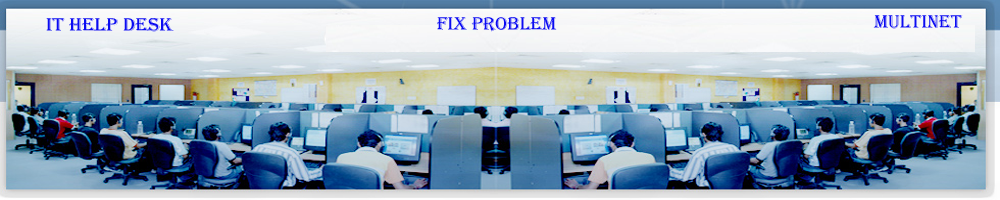
<style>
.page{position:relative;width:1000px;height:200px}
.page>*{position:absolute;margin:0}
.t1{font:19.2px "Algerian";color:#0b0bf2}
.t2{font:18.4px "Algerian";color:#0b0bf2;scale:1.06 1}
</style>
<div class="page">
<p class="t1" style="left:437px;top:17px;width:120px;height:15px">fix problem</p>
<p class="t1" style="left:873px;top:15px;width:90px;height:14px">Multinet</p>
<p class="t2" style="left:46px;top:18px;width:128px;height:14px">it help desk</p>
</div>
